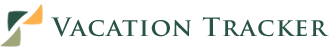
<style>
.page{position:relative;width:329px;height:53px;background:#ffffff}
.page>*{position:absolute;margin:0}
.t1{font:24.8px "TrajanPro-Bold";letter-spacing:0.05em;color:#295347}
</style>
<div class="page">
<p class="t1" style="left:51px;top:17px;width:278px;height:20px">Vacation Tracker</p>
</div>
